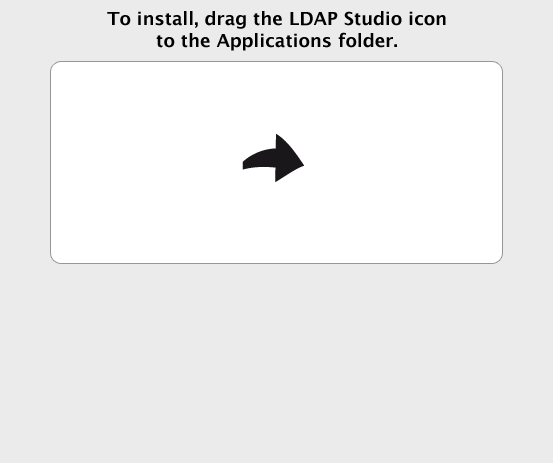
<style>
.page{position:relative;width:553px;height:463px;background:#ebebeb}
.page>*{position:absolute;margin:0}
.t1{font:18px "LucidaGrande-Bold";color:#000000}
</style>
<div class="page">
<p class="t1" style="left:107px;top:11px;width:339px;height:40px;text-align:center">To install, drag the LDAP Studio icon<br>to the Applications folder.</p>
</div>
